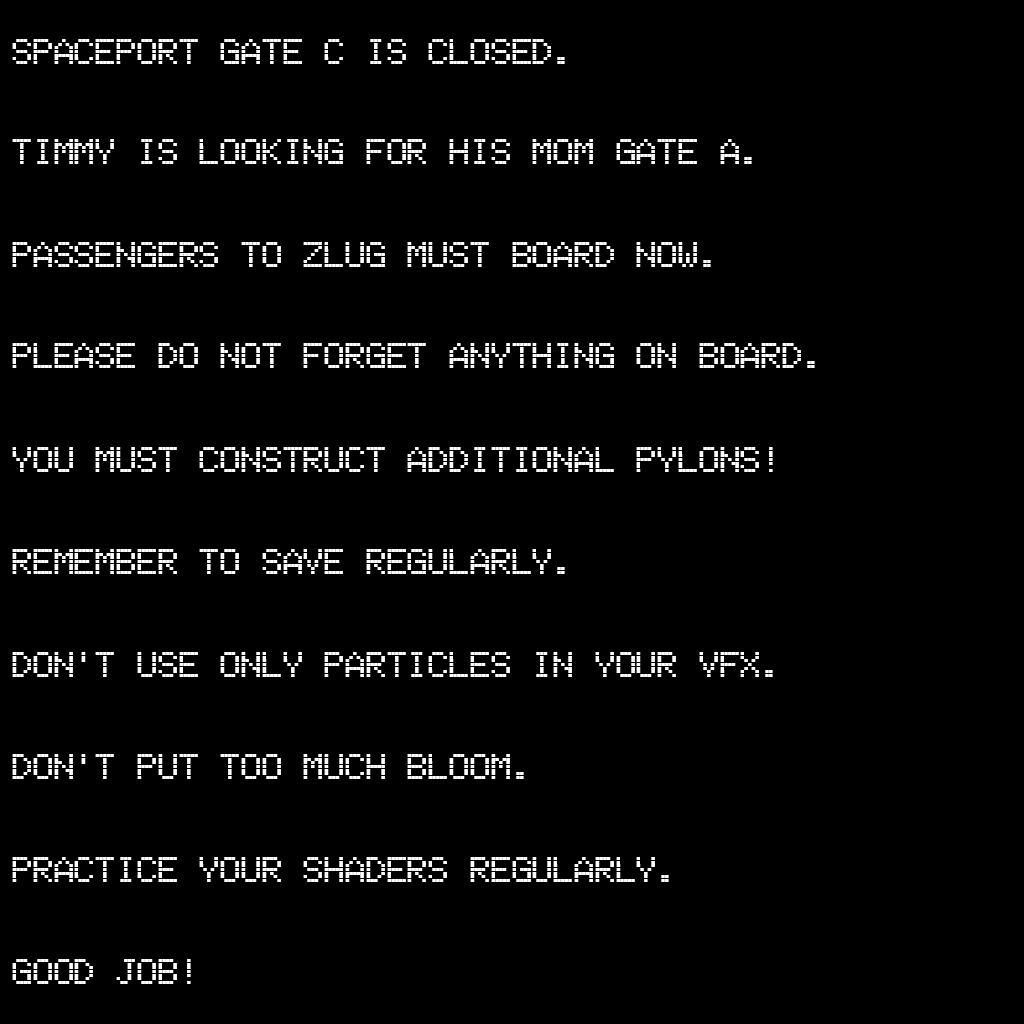
<style>
.page{position:relative;width:1024px;height:1024px;background:#000000}
.page>*{position:absolute;margin:0}
.t1{font:34px "ElectronicHighwaySign";color:#ffffff}
</style>
<div class="page">
<p class="t1" style="left:12px;top:39px;width:553px;height:25px">Spaceport gate C is closed.</p>
<p class="t1" style="left:12px;top:139px;width:740px;height:25px">Timmy is looking for his mom gate A.</p>
<p class="t1" style="left:12px;top:242px;width:699px;height:25px">Passengers to Zlug must board now.</p>
<p class="t1" style="left:12px;top:343px;width:803px;height:25px">Please do not forget anything on board.</p>
<p class="t1" style="left:12px;top:447px;width:761px;height:25px">You Must Construct Additional Pylons!</p>
<p class="t1" style="left:12px;top:549px;width:553px;height:25px">Remember to save regularly.</p>
<p class="t1" style="left:12px;top:652px;width:761px;height:25px">Don't use only particles in your VFX.</p>
<p class="t1" style="left:12px;top:754px;width:512px;height:25px">Don't put too much bloom.</p>
<p class="t1" style="left:12px;top:857px;width:657px;height:25px">Practice your shaders regularly.</p>
<p class="t1" style="left:12px;top:959px;width:179px;height:25px">Good job!</p>
</div>
